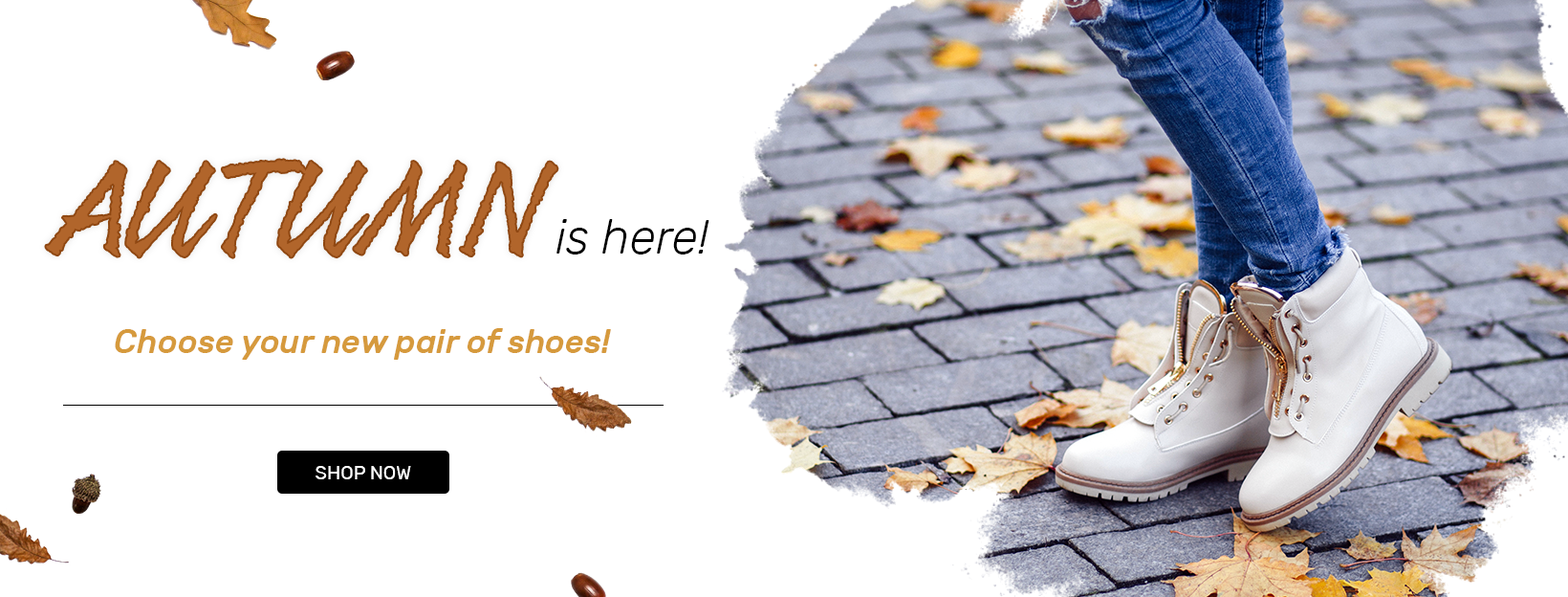
<style>
.page{position:relative;width:1568px;height:597px;background:#ffffff}
.page>*{position:absolute;margin:0}
.t1{font:143.4px "Resphekt-Regular";color:#b1652b}
.t2{font:47.8px "Rubik-LightItalic";color:#000000}
.t3{font:66.9px "Rubik-Light";color:#b1652b}
.t4{font:33.5px "Rubik-MediumItalic";color:#d69a3d}
.t5{font:19.1px "Rubik-Regular";color:#ffffff}
</style>
<div class="page">
<p class="t1" style="left:46px;top:160px;width:511px;height:97px">AUTUMN</p>
<p class="t2" style="left:556px;top:219px;width:153px;height:35px"><span class="t3"> </span>is here!</p>
<p class="t4" style="left:115px;top:328px;width:496px;height:31px">Choose your new pair of shoes!</p>
<p class="t5" style="left:316px;top:466px;width:95px;height:13px">SHOP NOW</p>
</div>
